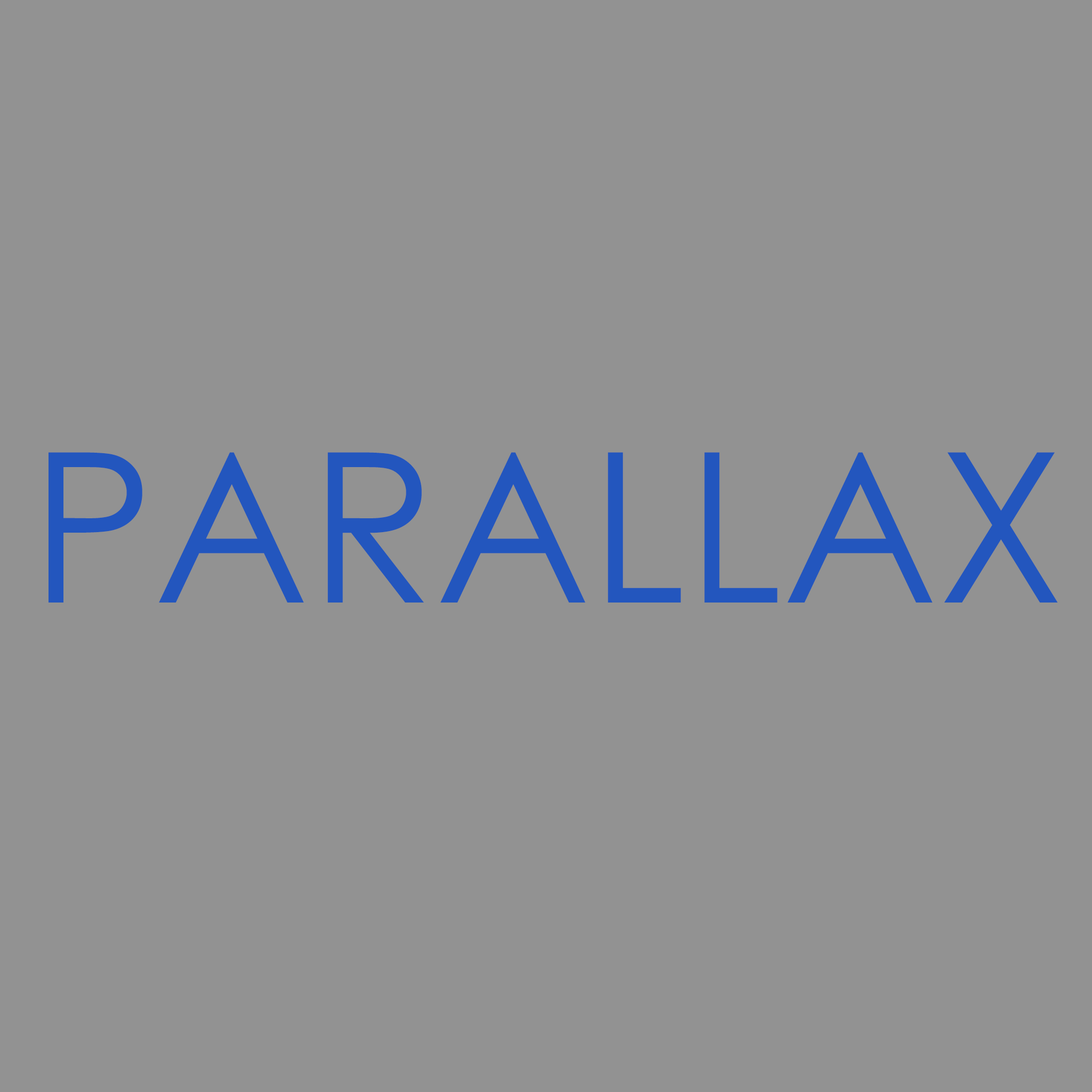
<style>
.page{position:relative;width:1092px;height:1092px;background:#929292}
.page>*{position:absolute;margin:0}
.t1{font:208.8px "CenturyGothic";color:#2356be}
</style>
<div class="page">
<p class="t1" style="left:49px;top:452px;width:1009px;height:151px">PARALLAX</p>
</div>
